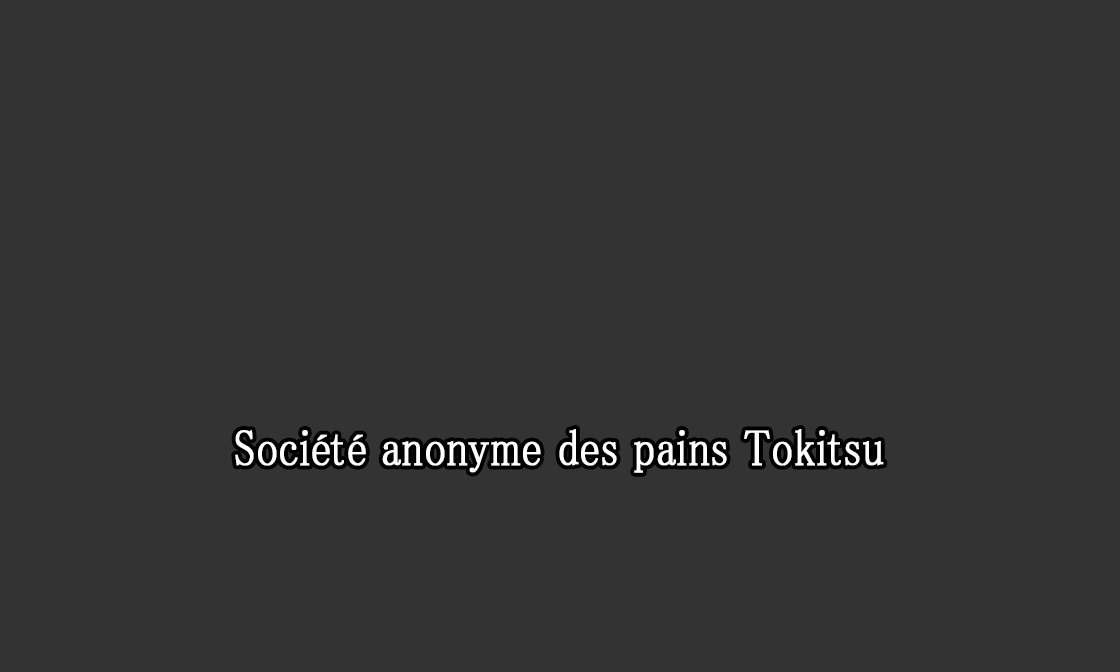
<style>
.page{position:relative;width:1120px;height:672px;background:#333333}
.page>*{position:absolute;margin:0}
.t1{font:50.7px "MS-PMincho";color:#ffffff;font-weight:bold;scale:0.84 1}
</style>
<div class="page">
<p class="t1" style="left:235px;top:429px;width:649px;height:44px">Société anonyme des pains Tokitsu</p>
</div>
